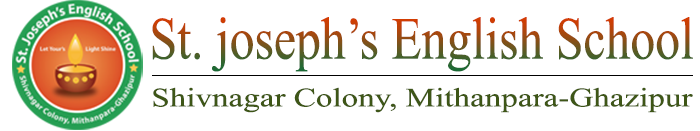
<style>
.page{position:relative;width:700px;height:131px;background:#ffffff}
.page>*{position:absolute;margin:0}
.t1{font:59.6px "MongolianBaiti";scale:0.83 1}
.t2{font:26.7px "MongolianBaiti";color:#3e5617;scale:1.24 1}
.t3{font:29.2px "MongolianBaiti";color:#3e5617;scale:1.24 1}
</style>
<div class="page">
<p class="t1" style="left:152px;top:17px;width:541px;height:55px">St. joseph’s English School</p>
<p class="t2" style="left:153px;top:87px;width:540px;height:26px"><span class="t3"> </span>Shivnagar Colony, Mithanpara-Ghazipur</p>
</div>
